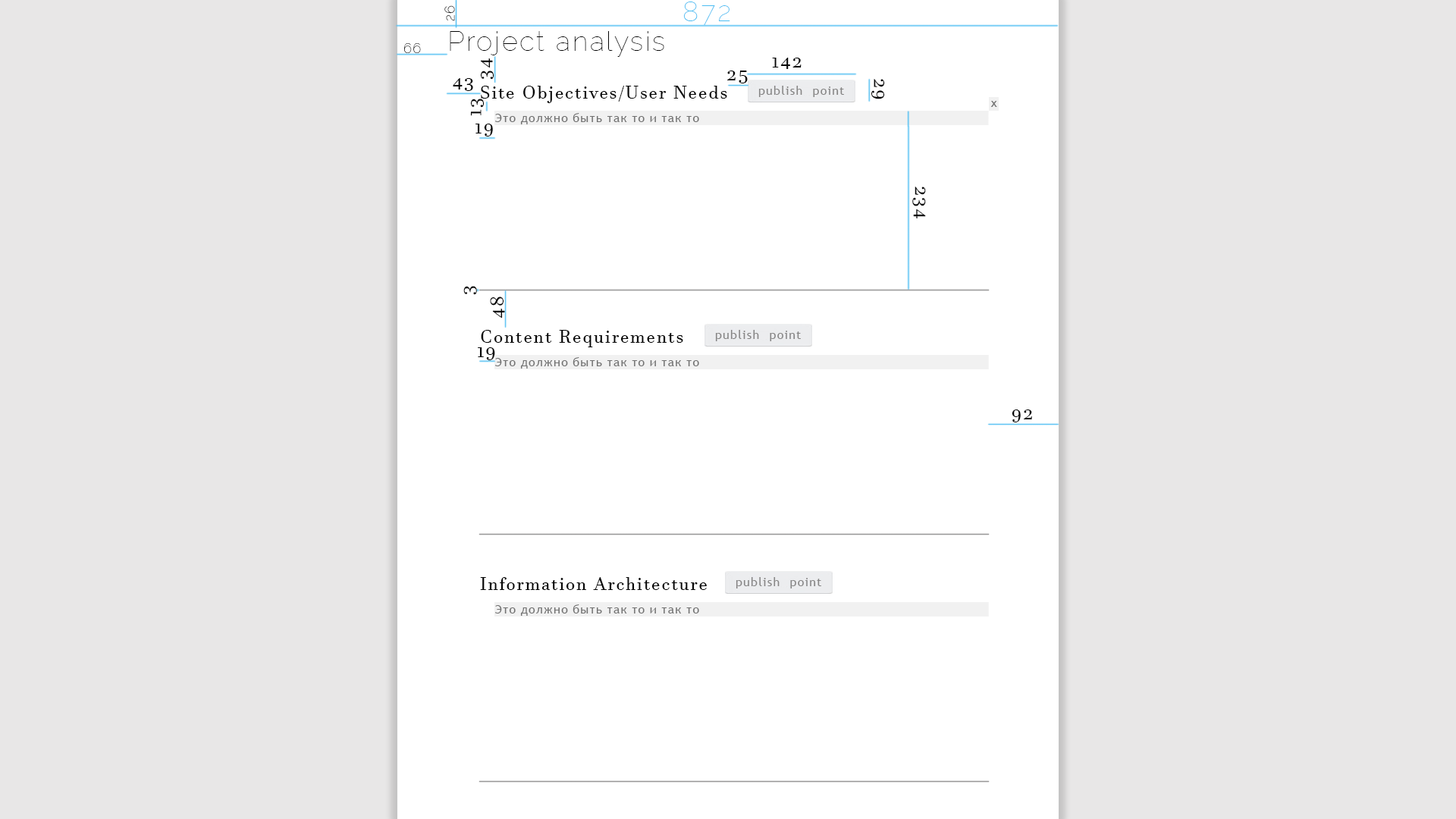
<style>
.page{position:relative;width:1456px;height:819px;background:#e8e7e7}
.page>*{position:absolute;margin:0}
.t1{font:13.6px "Raleway-Thin";letter-spacing:0.075em;color:#060606}
.t2{font:27.3px "Raleway-Thin";letter-spacing:0.075em;color:#4cbdf2}
.t3{font:27.3px "Raleway-Thin";letter-spacing:0.075em;color:#060606}
.t4{font:18.2px "JavaneseText";letter-spacing:0.075em;color:#060606}
.t5{font:12.1px "TrebuchetMS";letter-spacing:0.075em;color:#868585}
.t6{font:12.1px "TrebuchetMS";letter-spacing:0.075em;color:#727272}
</style>
<div class="page">
<p class="t1" style="left:444px;top:5px;width:11px;height:16px;rotate:-90deg">26</p>
<p class="t2" style="left:683px;top:2px;width:47px;height:23px">872</p>
<p class="t3" style="left:450px;top:31px;width:214px;height:26px">Project analysis</p>
<p class="t1" style="left:404px;top:43px;width:17px;height:10px">66</p>
<p class="t4" style="left:480px;top:58px;width:14px;height:22px;rotate:-90deg">34</p>
<p class="t4" style="left:772px;top:58px;width:30px;height:11px">142</p>
<p class="t4" style="left:727px;top:71px;width:21px;height:12px">25</p>
<p class="t4" style="left:453px;top:78px;width:20px;height:13px">43</p>
<p class="t4" style="left:481px;top:86px;width:246px;height:17px">Site Objectives/User Needs</p>
<p class="t5" style="left:758px;top:86px;width:86px;height:11px">publish  point</p>
<p class="t4" style="left:871px;top:79px;width:14px;height:20px;rotate:90deg">29</p>
<p class="t4" style="left:470px;top:99px;width:15px;height:17px;rotate:-90deg">13</p>
<p class="t6" style="left:990px;top:101px;width:7px;height:6px">x</p>
<p class="t6" style="left:495px;top:113px;width:204px;height:11px">Это должно быть так то и так то</p>
<p class="t4" style="left:475px;top:124px;width:18px;height:12px">19</p>
<p class="t4" style="left:912px;top:187px;width:14px;height:31px;rotate:90deg">234</p>
<p class="t4" style="left:463px;top:286px;width:14px;height:9px;rotate:-90deg">3</p>
<p class="t4" style="left:490px;top:297px;width:15px;height:21px;rotate:-90deg">48</p>
<p class="t4" style="left:481px;top:330px;width:202px;height:17px">Content Requirements</p>
<p class="t5" style="left:715px;top:330px;width:86px;height:11px">publish  point</p>
<p class="t4" style="left:478px;top:347px;width:17px;height:13px">19</p>
<p class="t6" style="left:495px;top:357px;width:204px;height:12px">Это должно быть так то и так то</p>
<p class="t4" style="left:1012px;top:409px;width:20px;height:13px">92</p>
<p class="t4" style="left:480px;top:577px;width:227px;height:13px">Information Architecture</p>
<p class="t5" style="left:736px;top:577px;width:85px;height:11px">publish  point</p>
<p class="t6" style="left:495px;top:604px;width:204px;height:12px">Это должно быть так то и так то</p>
</div>
